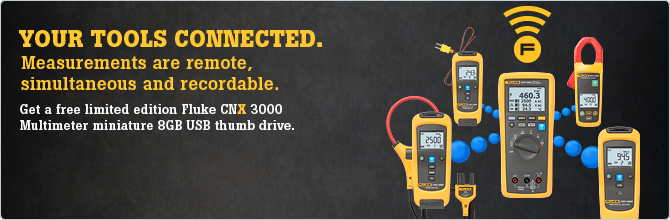
<style>
.page{position:relative;width:670px;height:220px}
.page>*{position:absolute;margin:0}
.t1{font:24px "BotonPro-Bold";color:#ffc82e;text-transform:uppercase}
.t2{font:18px "BotonPro-Medium";letter-spacing:0.02em;color:#ffc82e}
.t3{font:13px "BotonPro-Medium";letter-spacing:0.02em;color:#ffffff}
.t4{font:13px "BotonPro-Bold";letter-spacing:0.02em;color:#ffc82e}
</style>
<div class="page">
<p class="t1" style="left:19px;top:30px;width:303px;height:17px">Your tools connected.</p>
<p class="t2" style="left:21px;top:56px;width:257px;height:34px">Measurements are remote, <br>simultaneous and recordable.</p>
<p class="t3" style="left:20px;top:104px;width:274px;height:26px">Get a free limited edition Fluke CN<span class="t4">X</span> 3000 Multimeter miniature 8GB USB thumb drive.</p>
</div>
